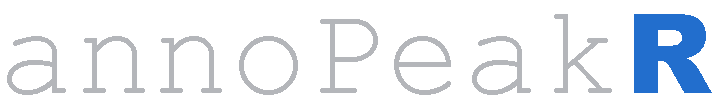
<style>
.page{position:relative;width:720px;height:108px;background:#ffffff}
.page>*{position:absolute;margin:0}
.t1{font:129px "CourierNewPSMT";color:#b4b6ba}
.t2{font:110px "Arial-Black";color:#226ecd}
</style>
<div class="page">
<p class="t1" style="left:7px;top:14px;width:605px;height:81px">annoPeak</p>
<p class="t2" style="left:634px;top:14px;width:78px;height:79px">R</p>
</div>
